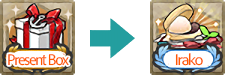
<style>
.page{position:relative;width:225px;height:75px;background:#ffffff}
.page>*{position:absolute;margin:0}
.t1{font:16px "AdobeClean-SemiCn";letter-spacing:-0.08em;color:#ff5a00}
.t2{font:16px "AdobeClean-Regular";letter-spacing:-0.08em;color:#ff5a00}
</style>
<div class="page">
<p class="t1" style="left:8px;top:54px;width:61px;height:12px">Present Box</p>
<p class="t2" style="left:175px;top:53px;width:28px;height:13px">Irako</p>
</div>
